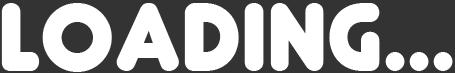
<style>
.page{position:relative;width:455px;height:73px;background:#ffffff}
.page>*{position:absolute;margin:0}
.t1{font:95.8px "Junegull-Regular";color:#ffffff}
</style>
<div class="page">
<p class="t1" style="left:1px;top:3px;width:452px;height:69px">Loading...</p>
</div>
